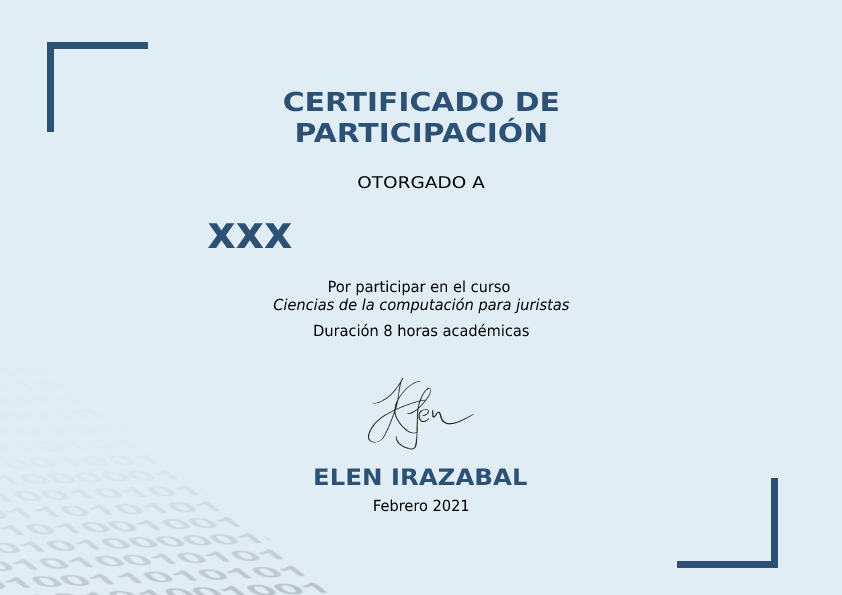
<style>
.page{position:relative;width:842px;height:595px;background:#e0edf5}
.page>*{position:absolute;margin:0}
.t1{font:26.1px "DejaVuSans-Bold";color:#2d5075;scale:1.14 1}
.t2{font:16.1px "DejaVuSans";color:#000000;scale:1.15 1}
.t3{font:45.5px "DejaVuSans-Bold";color:#2d5075;scale:0.97 1}
.t4{font:15.3px "DejaVuSans-Oblique";color:#000000;scale:0.95 1}
.t5{font:15.3px "DejaVuSans";color:#000000;scale:0.95 1}
.t6{font:22.7px "DejaVuSans-Bold";color:#2d5075;scale:1.08 1}
</style>
<div class="page">
<p class="t1" style="left:284px;top:91px;width:274px;height:52px;text-align:center">CERTIFICADO DE<br>PARTICIPACIÓN</p>
<p class="t2" style="left:358px;top:176px;width:127px;height:13px">OTORGADO A</p>
<p class="t3" style="left:208px;top:223px;width:84px;height:25px">xxx</p>
<p class="t4" style="left:273px;top:280px;width:297px;height:34px;text-align:center"><span class="t5">Por participar en el curso <br></span>Ciencias de la computación para juristas</p>
<p class="t5" style="left:314px;top:323px;width:215px;height:14px">Duración 8 horas académicas</p>
<p class="t6" style="left:315px;top:468px;width:212px;height:17px">ELEN IRAZABAL</p>
<p class="t5" style="left:374px;top:499px;width:95px;height:13px">Febrero 2021</p>
</div>
